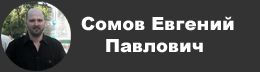
<style>
.page{position:relative;width:260px;height:72px;background:#333333}
.page>*{position:absolute;margin:0}
.t1{font:18px "Arial-Black";color:#ffffff}
</style>
<div class="page">
<p class="t1" style="left:81px;top:16px;width:153px;height:37px">Сомов Евгений<br>    Павлович</p>
</div>
